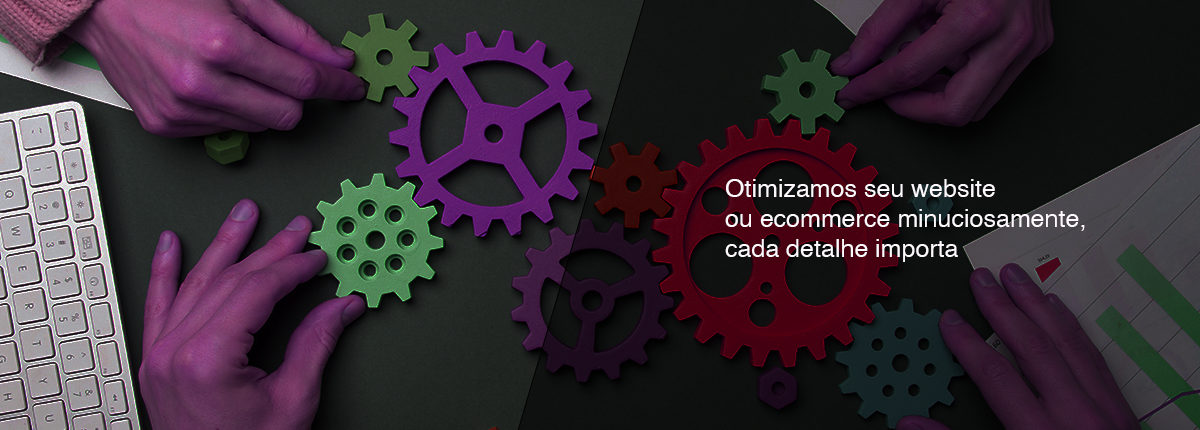
<style>
.page{position:relative;width:1200px;height:430px}
.page>*{position:absolute;margin:0}
.t1{font:25px "Helvetica";color:#fdf9fd}
</style>
<div class="page">
<p class="t1" style="left:725px;top:179px;width:360px;height:83px">Otimizamos seu website <br>ou ecommerce minuciosamente, cada detalhe importa</p>
</div>
